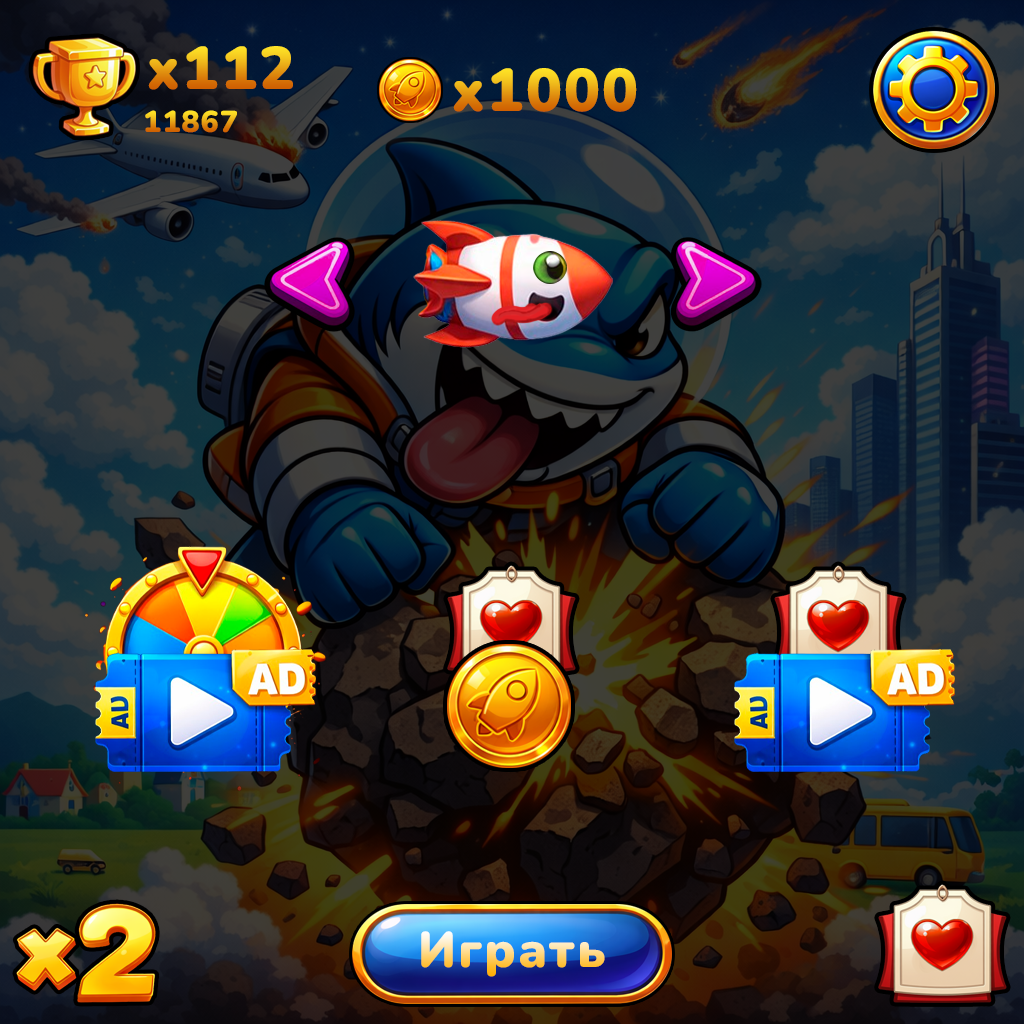
<style>
.page{position:relative;width:1024px;height:1024px}
.page>*{position:absolute;margin:0}
.t1{font:60px "Nunito-Black";letter-spacing:0.04em}
.t2{font:30px "Nunito-Black";letter-spacing:0.04em}
.t3{font:50px "Nunito-Black";letter-spacing:0.04em}
</style>
<div class="page">
<p class="t1" style="left:148px;top:46px;width:145px;height:44px">x112</p>
<p class="t1" style="left:453px;top:68px;width:184px;height:44px">x1000</p>
<p class="t2" style="left:145px;top:110px;width:92px;height:23px">11867</p>
<p class="t3" style="left:421px;top:931px;width:184px;height:46px">Играть</p>
</div>
